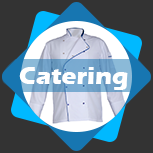
<style>
.page{position:relative;width:153px;height:153px;background:#333333}
.page>*{position:absolute;margin:0}
.t1{font:25px "ErasITC-Bold";color:#ffffff}
</style>
<div class="page">
<p class="t1" style="left:19px;top:67px;width:109px;height:23px">Catering</p>
</div>
